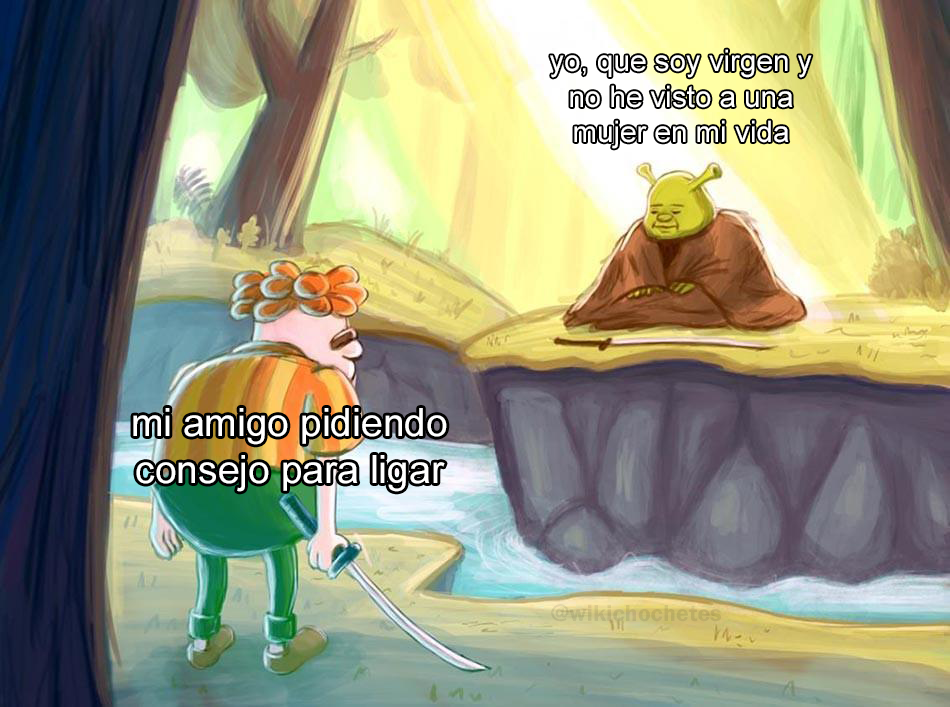
<style>
.page{position:relative;width:950px;height:707px}
.page>*{position:absolute;margin:0}
.t1{font:29.7px "ArialMT";color:#ffffff}
.t2{font:39.1px "ArialMT";color:#ffffff}
.t3{font:24px "FranklinGothic-Demi";color:#beb170}
</style>
<div class="page">
<p class="t1" style="left:550px;top:49px;width:262px;height:100px;text-align:center">yo, que soy virgen y<br>no he visto a una<br>mujer en mi vida</p>
<p class="t2" style="left:133px;top:408px;width:314px;height:84px;text-align:center">mi amigo pidiendo<br>consejo para ligar</p>
<p class="t3" style="left:551px;top:604px;width:170px;height:18px">@wikichochetes</p>
</div>
